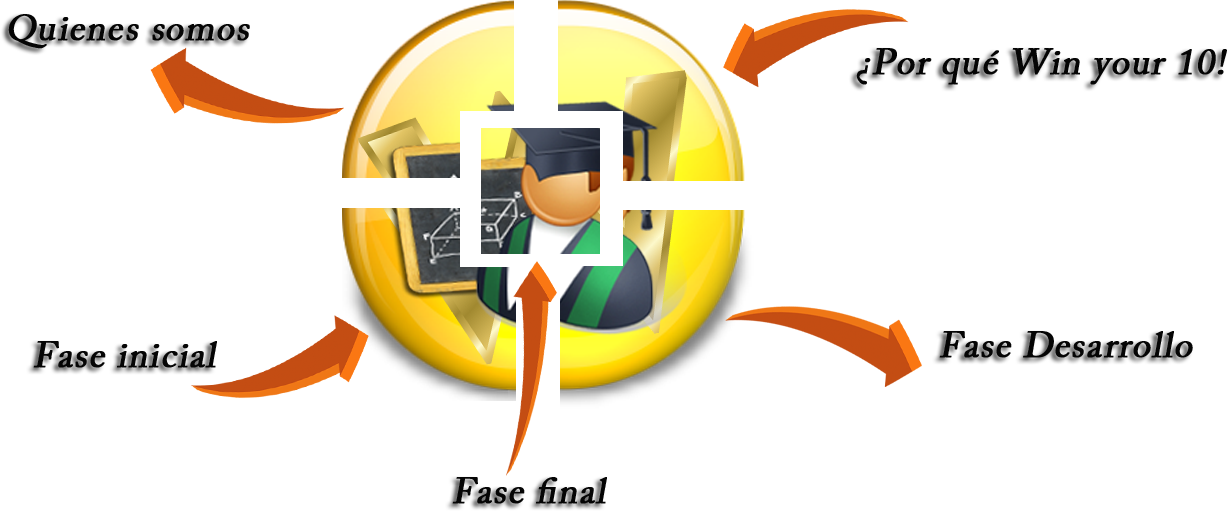
<style>
.page{position:relative;width:1227px;height:511px;background:#ffffff}
.page>*{position:absolute;margin:0}
.t1{font:36px "ACaslonPro-Regular";letter-spacing:0.02em;color:#050505;font-weight:bold;font-style:italic}
</style>
<div class="page">
<p class="t1" style="left:8px;top:14px;width:242px;height:35px">Quienes somos</p>
<p class="t1" style="left:856px;top:48px;width:371px;height:37px">¿Por qué Win your 10!</p>
<p class="t1" style="left:33px;top:341px;width:184px;height:27px">Fase inicial</p>
<p class="t1" style="left:939px;top:331px;width:254px;height:27px">Fase Desarrollo</p>
<p class="t1" style="left:452px;top:477px;width:155px;height:27px">Fase final</p>
</div>
